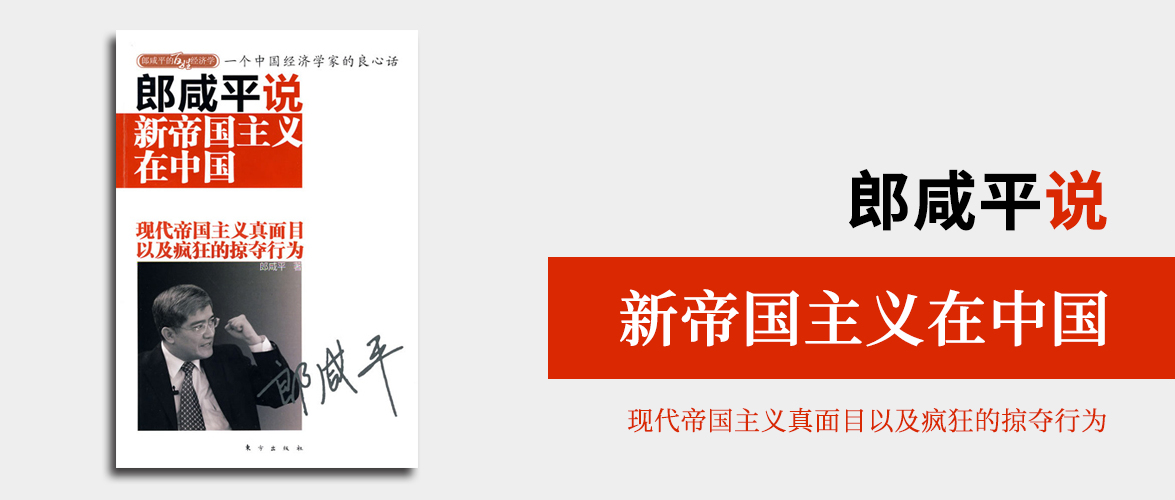
<style>
.page{position:relative;width:1175px;height:500px;background:#eeeeee}
.page>*{position:absolute;margin:0}
.t1{font:64px "SourceHanSansSC-Bold";color:#000000;font-weight:bold}
.t2{font:64px "SourceHanSansSC-Bold";color:#da2802;font-weight:bold}
.t3{font:60px "SourceHanSerifSC-SemiBold";color:#ffffff;font-weight:bold}
.t4{font:26px "SourceHanSerifSC-Regular";color:#d92902;font-weight:bold}
</style>
<div class="page">
<p class="t1" style="left:849px;top:169px;width:258px;height:62px">郎咸平<span class="t2">说</span></p>
<p class="t3" style="left:620px;top:289px;width:488px;height:58px">新帝国主义在中国</p>
<p class="t4" style="left:628px;top:407px;width:478px;height:26px">现代帝国主义真面目以及疯狂的掠夺行为</p>
</div>
